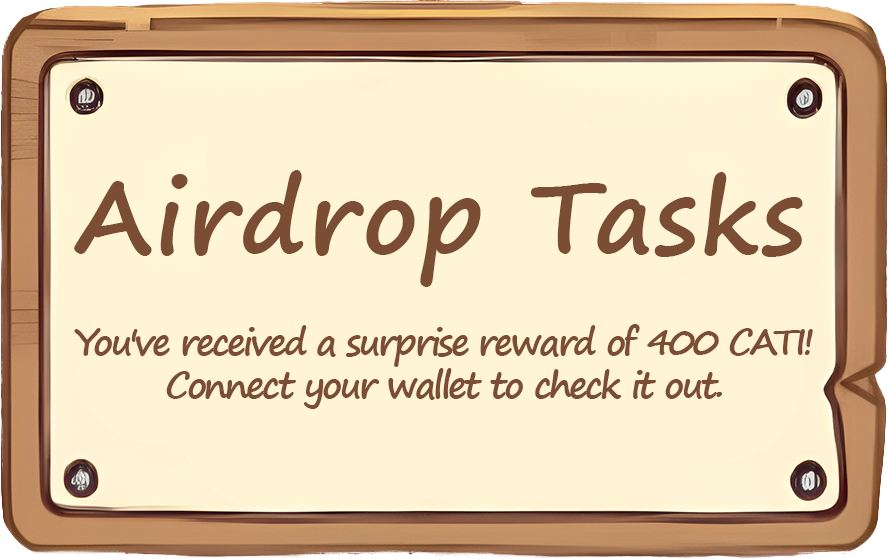
<style>
.page{position:relative;width:888px;height:559px;background:#fff5d5}
.page>*{position:absolute;margin:0}
.t1{font:100px "SegoePrint-Bold";letter-spacing:0.025em;color:#7a4d34}
.t2{font:36px "SegoePrint-Bold";letter-spacing:-0.075em;color:#7a4d34}
</style>
<div class="page">
<p class="t1" style="left:74px;top:170px;width:729px;height:117px">Airdrop Tasks</p>
<p class="t2" style="left:74px;top:324px;width:739px;height:85px;text-align:center">You've received a surprise reward of 400 CATI!<br>Connect your wallet to check it out.</p>
</div>
